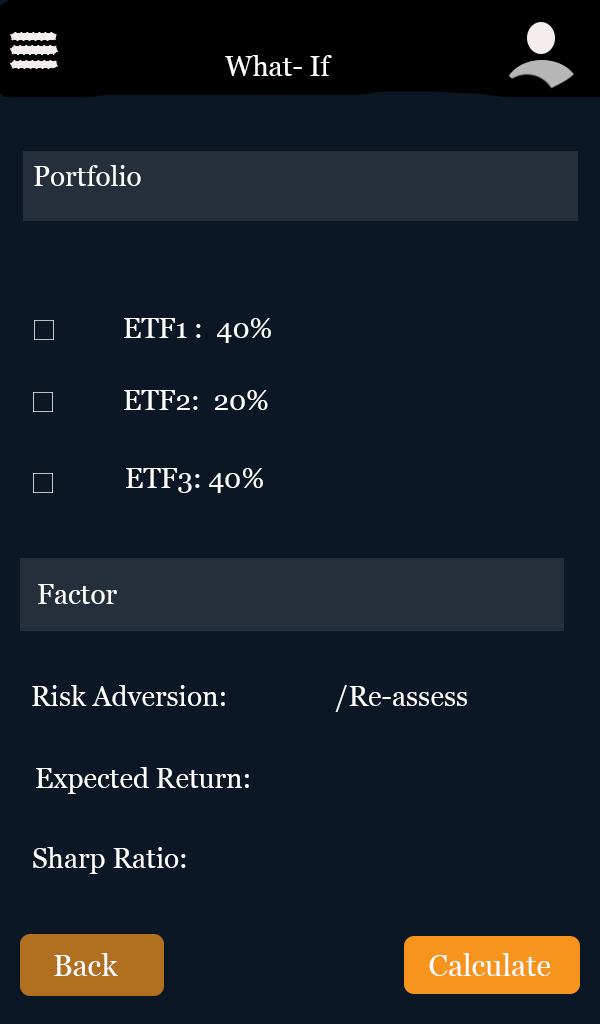
<style>
.page{position:relative;width:600px;height:1024px;background:#0c1726}
.page>*{position:absolute;margin:0}
.t1{font:28px "Georgia";color:#ffffff}
.t2{font:30px "Georgia";color:#ffffff}
</style>
<div class="page">
<p class="t1" style="left:225px;top:55px;width:107px;height:21px">What- If</p>
<p class="t1" style="left:34px;top:165px;width:107px;height:21px">Portfolio</p>
<p class="t1" style="left:124px;top:318px;width:147px;height:25px">ETF1 :  40%</p>
<p class="t1" style="left:124px;top:390px;width:144px;height:20px">ETF2:  20%</p>
<p class="t1" style="left:126px;top:468px;width:137px;height:25px">ETF3: 40%</p>
<p class="t1" style="left:38px;top:584px;width:79px;height:20px">Factor</p>
<p class="t1" style="left:32px;top:685px;width:435px;height:27px">Risk Adversion:                /Re-assess</p>
<p class="t1" style="left:36px;top:767px;width:213px;height:27px">Expected Return:</p>
<p class="t1" style="left:33px;top:847px;width:153px;height:27px">Sharp Ratio:</p>
<p class="t2" style="left:54px;top:953px;width:497px;height:23px">Back                                           Calculate</p>
</div>
